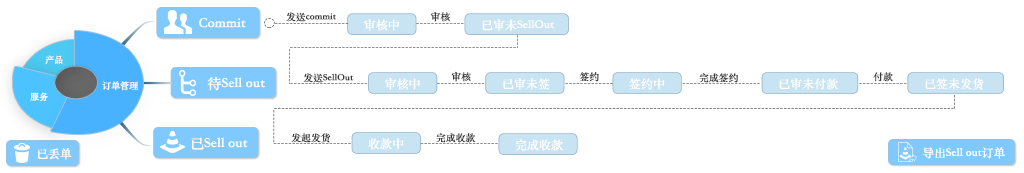
<style>
.page{position:relative;width:1024px;height:173px;background:#ffffff}
.page>*{position:absolute;margin:0}
.t1{font:9.6px "STSongti-TC-Bold";color:#3b3b3b}
.t2{font:13.9px "STSongti-TC-Bold";color:#ffffff}
.t3{font:11.8px "STSongti-TC-Bold";color:#ffffff}
.t4{font:9px "STSongti-TC-Bold";color:#ffffff}
.t5{font:11.7px "STSongti-TC-Bold";color:#ffffff}
</style>
<div class="page">
<p class="t1" style="left:286px;top:12px;width:50px;height:10px">发送commit</p>
<p class="t1" style="left:430px;top:12px;width:21px;height:10px">审核</p>
<p class="t2" style="left:199px;top:18px;width:47px;height:10px">Commit</p>
<p class="t3" style="left:364px;top:19px;width:36px;height:12px">审核中</p>
<p class="t3" style="left:482px;top:19px;width:73px;height:12px">已审未SellOut</p>
<p class="t4" style="left:45px;top:55px;width:18px;height:10px">产品</p>
<p class="t2" style="left:207px;top:76px;width:58px;height:15px">待Sell out</p>
<p class="t1" style="left:303px;top:73px;width:51px;height:10px">发送SellOut</p>
<p class="t3" style="left:385px;top:78px;width:35px;height:12px">审核中</p>
<p class="t1" style="left:451px;top:71px;width:20px;height:11px">审核</p>
<p class="t3" style="left:503px;top:78px;width:47px;height:12px">已审未签</p>
<p class="t1" style="left:579px;top:72px;width:20px;height:10px">签约</p>
<p class="t3" style="left:629px;top:78px;width:36px;height:12px">签约中</p>
<p class="t1" style="left:699px;top:73px;width:40px;height:10px">完成签约</p>
<p class="t3" style="left:779px;top:78px;width:60px;height:12px">已审未付款</p>
<p class="t1" style="left:873px;top:72px;width:20px;height:10px">付款</p>
<p class="t3" style="left:925px;top:78px;width:59px;height:12px">已签未发货</p>
<p class="t4" style="left:102px;top:81px;width:37px;height:10px">订单管理</p>
<p class="t4" style="left:30px;top:92px;width:18px;height:10px">服务</p>
<p class="t2" style="left:191px;top:137px;width:57px;height:13px">已Sell out</p>
<p class="t1" style="left:291px;top:133px;width:40px;height:10px">发起发货</p>
<p class="t1" style="left:436px;top:133px;width:40px;height:10px">完成收款</p>
<p class="t5" style="left:37px;top:148px;width:35px;height:12px">已丢单</p>
<p class="t3" style="left:368px;top:138px;width:36px;height:12px">收款中</p>
<p class="t3" style="left:515px;top:139px;width:48px;height:12px">完成收款</p>
<p class="t5" style="left:922px;top:147px;width:84px;height:12px">导出Sell out订单</p>
</div>
